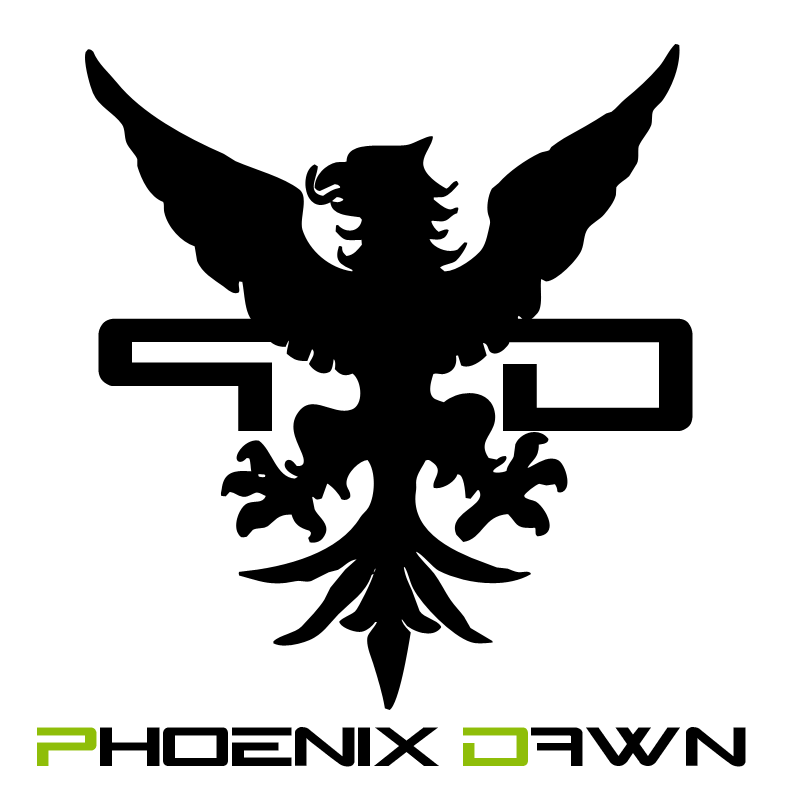
<style>
.page{position:relative;width:800px;height:800px;background:#ffffff}
.page>*{position:absolute;margin:0}
.t1{font:60px "N-Gage";letter-spacing:0.01em;color:#000000}
.t2{font:60px "N-Gage";letter-spacing:0.01em;color:#8fbe09}
</style>
<div class="page">
<p class="t1" style="left:37px;top:727px;width:709px;height:40px"><span class="t2">P</span>hoenix <span class="t2">D</span>AWN</p>
</div>
